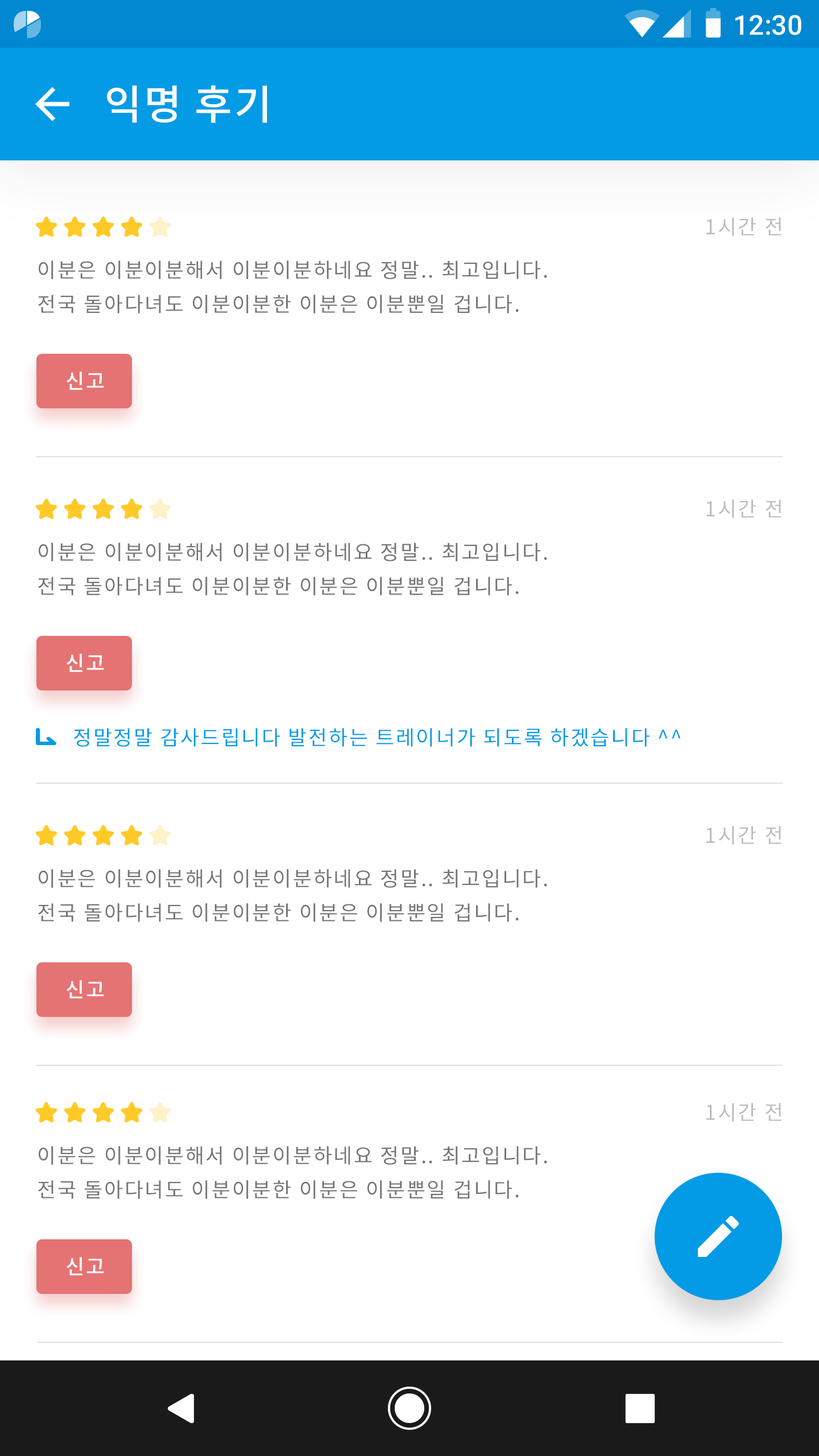
<style>
.page{position:relative;width:819px;height:1456px;background:#ffffff}
.page>*{position:absolute;margin:0}
.t1{font:27.3px "Roboto-Medium";color:#ffffff}
.t2{font:40.9px "NotoSansCJKkr-Medium";letter-spacing:0.05em;color:#ffffff}
.t3{font:20.5px "NotoSansCJKkr-Regular";letter-spacing:0.072em;color:#bdbdbd}
.t4{font:20.5px/34.1px "NotoSansCJKkr-Regular";letter-spacing:0.072em;color:#757575}
.t5{font:20.5px "NotoSansCJKkr-Medium";letter-spacing:0.072em;color:#ffffff}
.t6{font:20.5px "NotoSansCJKkr-Regular";letter-spacing:0.072em;color:#039be5}
</style>
<div class="page">
<p class="t1" style="left:735px;top:15px;width:66px;height:20px">12:30</p>
<p class="t2" style="left:107px;top:85px;width:160px;height:38px">익명 후기</p>
<p class="t3" style="left:706px;top:217px;width:75px;height:19px">1시간 전</p>
<p class="t4" style="left:38px;top:260px;width:509px;height:53px">이분은 이분이분해서 이분이분하네요 정말.. 최고입니다.<br>전국 돌아다녀도 이분이분한 이분은 이분뿐일 겁니다.</p>
<p class="t5" style="left:67px;top:371px;width:37px;height:19px">신고</p>
<p class="t3" style="left:706px;top:499px;width:75px;height:19px">1시간 전</p>
<p class="t4" style="left:38px;top:543px;width:509px;height:52px">이분은 이분이분해서 이분이분하네요 정말.. 최고입니다.<br>전국 돌아다녀도 이분이분한 이분은 이분뿐일 겁니다.</p>
<p class="t5" style="left:67px;top:653px;width:37px;height:19px">신고</p>
<p class="t6" style="left:74px;top:728px;width:607px;height:19px">정말정말 감사드립니다 발전하는 트레이너가 되도록 하겠습니다 ^^</p>
<p class="t3" style="left:706px;top:826px;width:75px;height:19px">1시간 전</p>
<p class="t4" style="left:38px;top:869px;width:509px;height:53px">이분은 이분이분해서 이분이분하네요 정말.. 최고입니다.<br>전국 돌아다녀도 이분이분한 이분은 이분뿐일 겁니다.</p>
<p class="t5" style="left:67px;top:980px;width:37px;height:19px">신고</p>
<p class="t3" style="left:706px;top:1103px;width:75px;height:19px">1시간 전</p>
<p class="t4" style="left:38px;top:1146px;width:509px;height:53px">이분은 이분이분해서 이분이분하네요 정말.. 최고입니다.<br>전국 돌아다녀도 이분이분한 이분은 이분뿐일 겁니다.</p>
<p class="t5" style="left:67px;top:1257px;width:37px;height:19px">신고</p>
</div>
